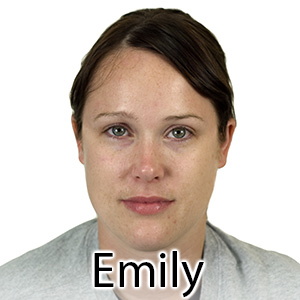
<style>
.page{position:relative;width:300px;height:300px;background:#ffffff}
.page>*{position:absolute;margin:0}
.t1{font:50px "MyriadPro-Regular";color:#000000}
</style>
<div class="page">
<p class="t1" style="left:94px;top:251px;width:110px;height:47px">Emily</p>
</div>
